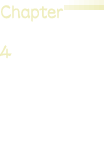
<style>
.page{position:relative;width:104px;height:160px;background:#ffffff}
.page>*{position:absolute;margin:0}
.t1{font:24.2px "DFLeiShoStd-W5";letter-spacing:-0.025em;color:#efeebe;scale:0.8 1}
.t2{font:24.2px "DFLeiShoStd-W5";letter-spacing:-0.025em;color:#efeebe;scale:0.83 1}
</style>
<div class="page">
<p class="t1" style="left:1px;top:5px;width:62px;height:17px">Chapter</p>
<p class="t2" style="left:0px;top:45px;width:12px;height:14px">4</p>
</div>
